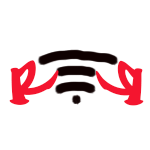
<style>
.page{position:relative;width:150px;height:150px;background:#ffffff}
.page>*{position:absolute;margin:0}
.t1{font:10.9px "MarkerFelt-Thin";color:#f4152f;scale:0.81 1}
.t2{font:10.9px "MarkerFelt-Thin";color:#f4152f;scale:0.8 1}
</style>
<div class="page">
<p class="t1" style="left:9px;top:60px;width:50px;height:45px;rotate:-28deg">R</p>
<p class="t2" style="left:95px;top:60px;width:49px;height:46px;rotate:-151deg">R</p>
</div>
